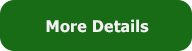
<style>
.page{position:relative;width:192px;height:51px;background:#176c15}
.page>*{position:absolute;margin:0}
.t1{font:16px "Tahoma-Bold";letter-spacing:0.01em;color:#f1f1f1}
</style>
<div class="page">
<p class="t1" style="left:46px;top:19px;width:103px;height:14px">More Details</p>
</div>
